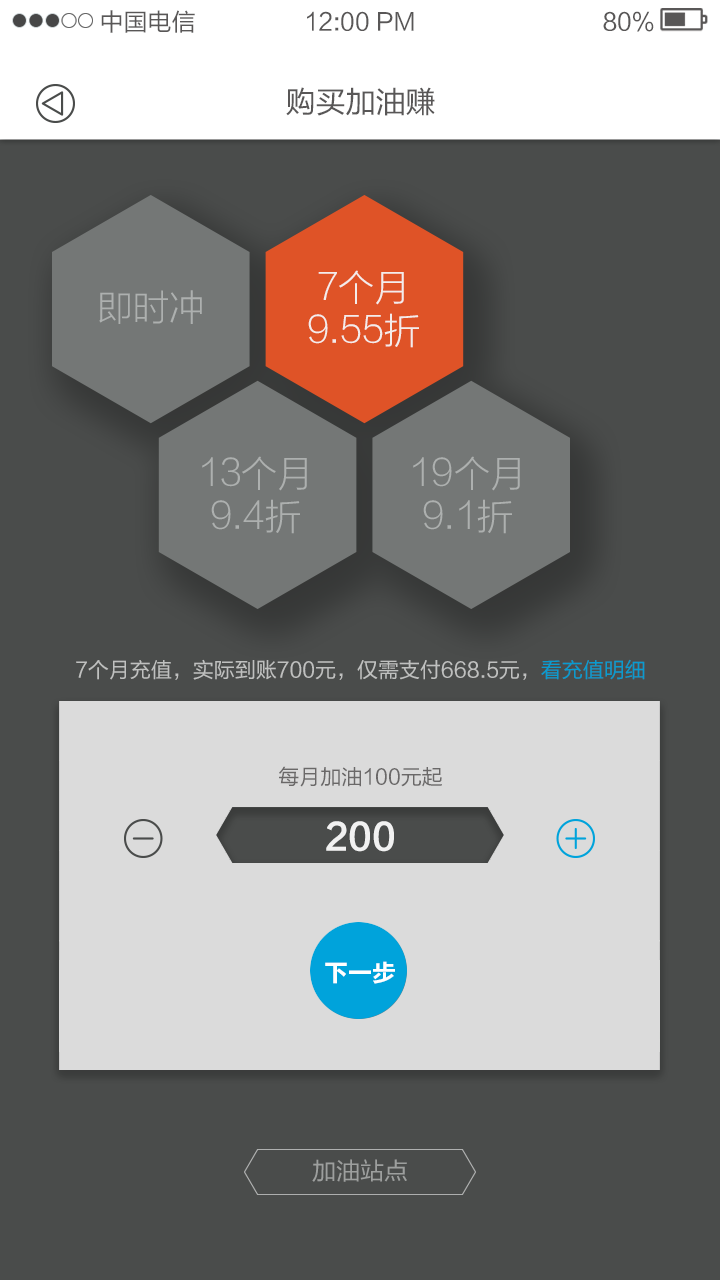
<style>
.page{position:relative;width:720px;height:1280px;background:#4a4c4b}
.page>*{position:absolute;margin:0}
.t1{font:24px "FZLTHK--GBK1-0";color:#595757}
.t2{font:30px "FZLTHK--GBK1-0";color:#595757}
.t3{font:36px/43px "FZLTXHJW--GB1-0";color:#f6f9f9}
.t4{font:36px "FZLTXHJW--GB1-0";color:#b2b5b4}
.t5{font:36px/43px "FZLTXHJW--GB1-0";color:#b2b5b4}
.t6{font:21px "FZLTHK--GBK1-0";color:#c9cac9}
.t7{font:21px "FZLTHK--GBK1-0";color:#00a3db}
.t8{font:21px "FZLTHK--GBK1-0";color:#595757}
.t9{font:36px "FZLTCHK--GBK1-0";color:#ffffff}
.t10{font:24px "FZLTCHK--GBK1-0";color:#ffffff}
.t11{font:24px "FZLTHK--GBK1-0";color:#9d9f9e}
</style>
<div class="page">
<p class="t1" style="left:101px;top:10px;width:94px;height:23px">中国电信</p>
<p class="t1" style="left:307px;top:11px;width:107px;height:20px">12:00 PM</p>
<p class="t1" style="left:603px;top:11px;width:51px;height:21px">80%</p>
<p class="t2" style="left:286px;top:87px;width:149px;height:29px">购买加油赚</p>
<p class="t3" style="left:308px;top:270px;width:111px;height:78px;text-align:center;opacity:0.9">7个月<br>9.55折</p>
<p class="t4" style="left:99px;top:290px;width:103px;height:34px;opacity:0.9">即时冲</p>
<p class="t5" style="left:202px;top:456px;width:105px;height:78px;text-align:center;opacity:0.9">13个月<br>9.4折</p>
<p class="t5" style="left:413px;top:456px;width:107px;height:78px;text-align:center;opacity:0.9">19个月<br>9.1折</p>
<p class="t6" style="left:76px;top:659px;width:569px;height:21px;opacity:0.9">7个月充值，实际到账700元，仅需支付668.5元，<span class="t7">看充值明细</span></p>
<p class="t8" style="left:279px;top:766px;width:163px;height:21px;opacity:0.9">每月加油100元起</p>
<p class="t9" style="left:326px;top:821px;width:68px;height:31px;opacity:0.9">200</p>
<p class="t10" style="left:325px;top:961px;width:70px;height:23px">下一步</p>
<p class="t11" style="left:312px;top:1159px;width:95px;height:23px">加油站点</p>
</div>
